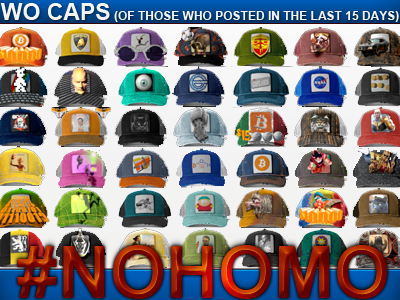
<style>
.page{position:relative;width:400px;height:300px}
.page>*{position:absolute;margin:0}
.t1{font:12px "Arial-BoldMT";color:#f3f3f3}
.t2{font:23px "Arial-BoldMT";color:#f3f3f3}
.t3{font:72px "Arial-BoldMT"}
</style>
<div class="page">
<p class="t1" style="left:0px;top:3px;width:399px;height:19px"><span class="t2">WO CAPS</span> (OF THOSE WHO POSTED IN THE LAST 15 DAYS)</p>
<p class="t3" style="left:17px;top:245px;width:371px;height:54px">#NOHOMO</p>
</div>
